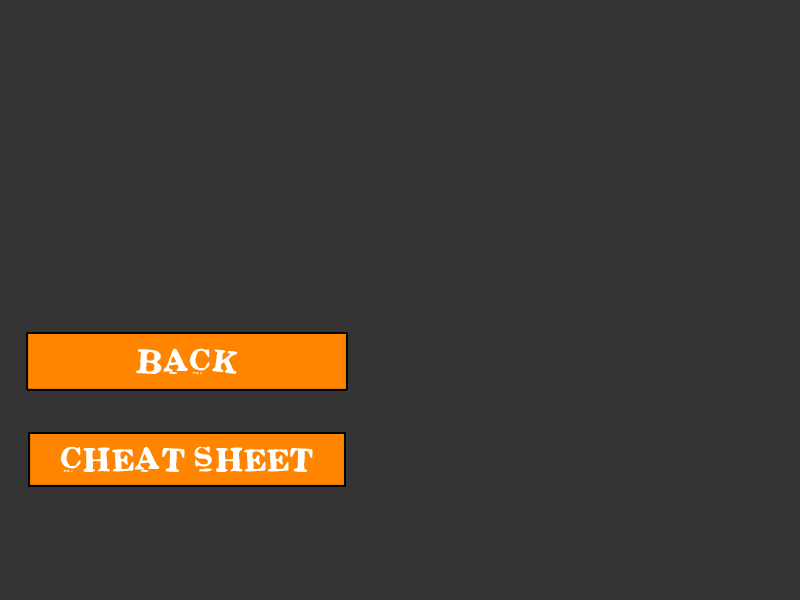
<style>
.page{position:relative;width:800px;height:600px;background:#333333}
.page>*{position:absolute;margin:0}
.t1{font:30px "Stickons-Two";color:#ffffff}
</style>
<div class="page">
<p class="t1" style="left:136px;top:348px;width:102px;height:26px">Back</p>
<p class="t1" style="left:60px;top:446px;width:253px;height:28px">Cheat Sheet</p>
</div>
